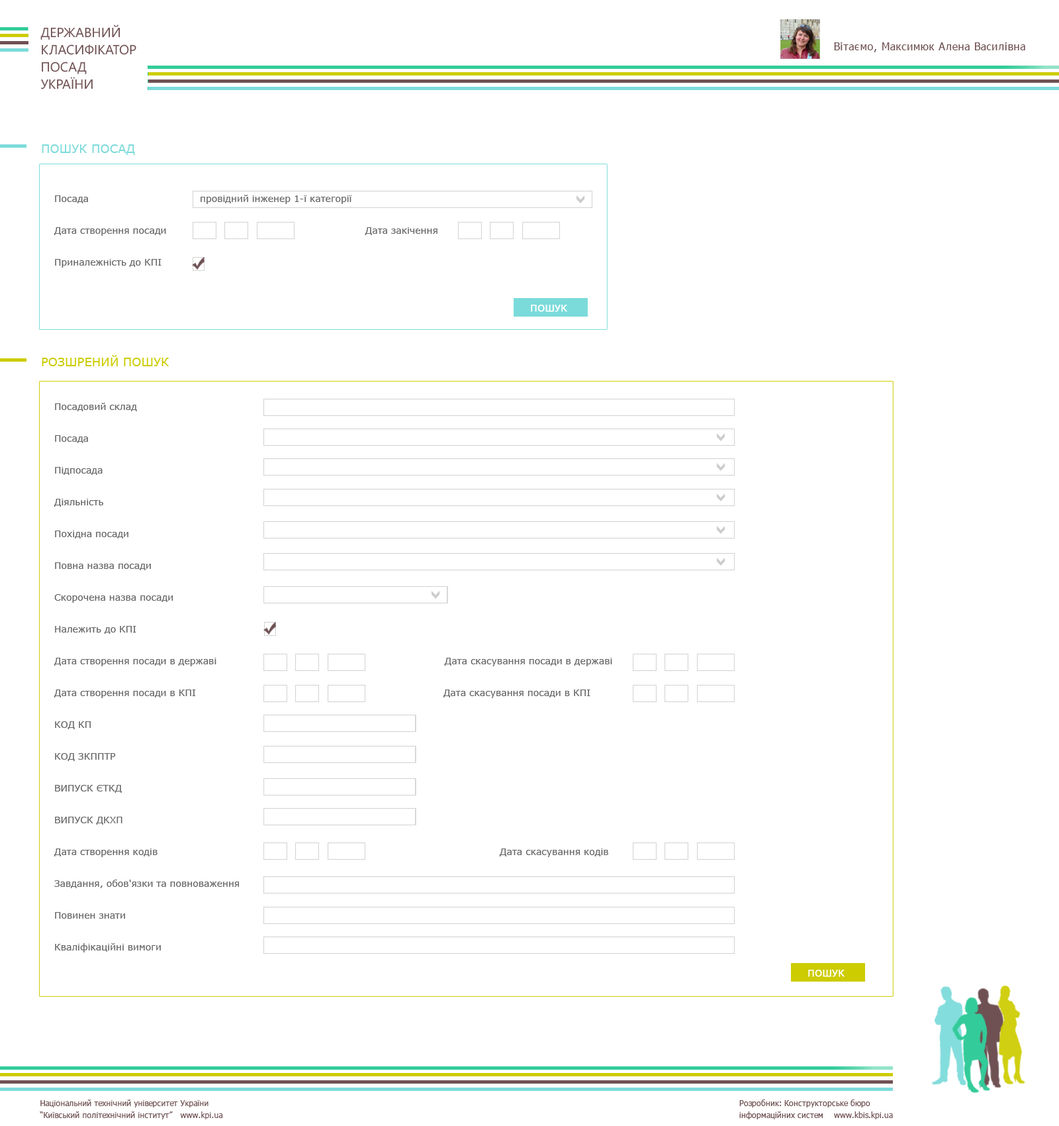
<style>
.page{position:relative;width:1059px;height:1126px;background:#ffffff}
.page>*{position:absolute;margin:0}
.t1{font:13.2px/17.2px "SegoeWP";color:#6f5153;text-transform:uppercase}
.t2{font:10.6px "Tahoma";letter-spacing:0.05em;color:#6f5153}
.t3{font:11.9px "Verdana";color:#7bdbda;text-transform:uppercase}
.t4{font:9.3px/31.8px "Verdana";color:#666666}
.t5{font:9.3px "Verdana";color:#666666}
.t6{font:9.3px "Verdana";color:#ffffff;text-transform:uppercase;font-weight:bold}
.t7{font:11.9px "Verdana";color:#cdcc00;text-transform:uppercase}
.t8{font:7.9px/11.9px "Tahoma";color:#6f5153}
</style>
<div class="page">
<p class="t1" style="left:40px;top:24px;width:96px;height:65px">Державний<br>класифікатор<br>посад<br>України</p>
<p class="t2" style="left:834px;top:42px;width:192px;height:10px">Вітаємо, Максимюк Алена Василівна</p>
<p class="t3" style="left:42px;top:144px;width:93px;height:11px">пошук посад</p>
<p class="t4" style="left:54px;top:195px;width:384px;height:72px">Посада<br>Дата створення посади                                                             Дата закічення<br>Приналежність до КПІ</p>
<p class="t5" style="left:201px;top:195px;width:151px;height:9px">провідний інженер 1-ї категорії</p>
<p class="t6" style="left:531px;top:305px;width:36px;height:7px">Пошук</p>
<p class="t7" style="left:42px;top:355px;width:128px;height:11px">Розшрений пошук</p>
<p class="t4" style="left:54px;top:403px;width:558px;height:549px">Посадовий склад<br>Посада<br>Підпосада<br>Діяльність<br>Похідна посади<br>Повна назва посади <br>Скорочена назва посади<br>Належить до КПІ<br>Дата створення посади в державі                                                                      Дата скасування посади в державі<br>Дата створення посади в КПІ                                                                            Дата скасування посади в КПІ<br>КОД КП <br>КОД ЗКППТР <br>ВИПУСК ЄТКД <br>ВИПУСК ДКХП <br>Дата створення кодів                                                                                                         Дата скасування кодів<br>Завдання, обов'язки та повноваження<br>Повинен знати<br>Кваліфікаційні вимоги</p>
<p class="t6" style="left:808px;top:969px;width:37px;height:8px">Пошук</p>
<p class="t8" style="left:40px;top:1099px;width:183px;height:20px">Національний технічний університет України<br>“Київський політехнічний інститут”   www.kpi.ua</p>
<p class="t8" style="left:740px;top:1099px;width:153px;height:20px">Розробник: Конструкторське бюро<br>інформаційних систем    www.kbis.kpi.ua</p>
</div>
